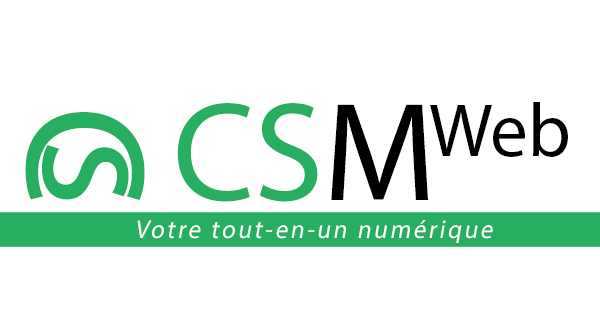
<style>
.page{position:relative;width:600px;height:315px;background:#ffffff}
.page>*{position:absolute;margin:0}
.t1{font:75.8px "MyriadPro-Regular";color:#000000}
.t2{font:171px "MyriadPro-Regular";color:#27ae61}
.t3{font:141.2px "MyriadPro-Regular";color:#27ae61}
.t4{font:141.2px "MyriadPro-Regular";color:#000000}
.t5{font:25.8px "MyriadPro-Regular";letter-spacing:0.1em;color:#ffffff;font-style:italic;scale:0.97 1}
</style>
<div class="page">
<p class="t1" style="left:430px;top:102px;width:138px;height:55px">Web</p>
<p class="t2" style="left:25px;top:112px;width:120px;height:88px;rotate:90deg">C</p>
<p class="t3" style="left:177px;top:103px;width:251px;height:99px">CS<span class="t4">M</span></p>
<p class="t2" style="left:42px;top:145px;width:87px;height:55px;rotate:90deg">s</p>
<p class="t5" style="left:137px;top:220px;width:356px;height:23px">Votre tout-en-un numérique</p>
</div>
